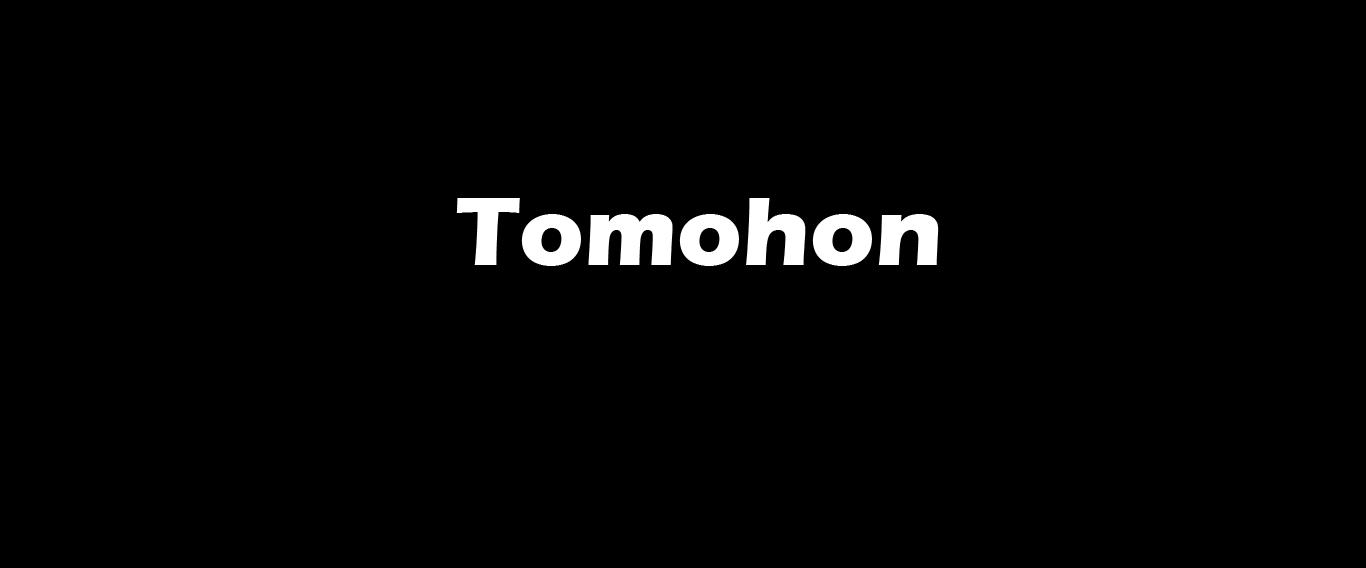
<style>
.page{position:relative;width:1366px;height:568px;background:#000000}
.page>*{position:absolute;margin:0}
.t1{font:100px "ErasITC-Bold";color:#ffffff}
</style>
<div class="page">
<p class="t1" style="left:456px;top:198px;width:483px;height:68px">Tomohon</p>
</div>
